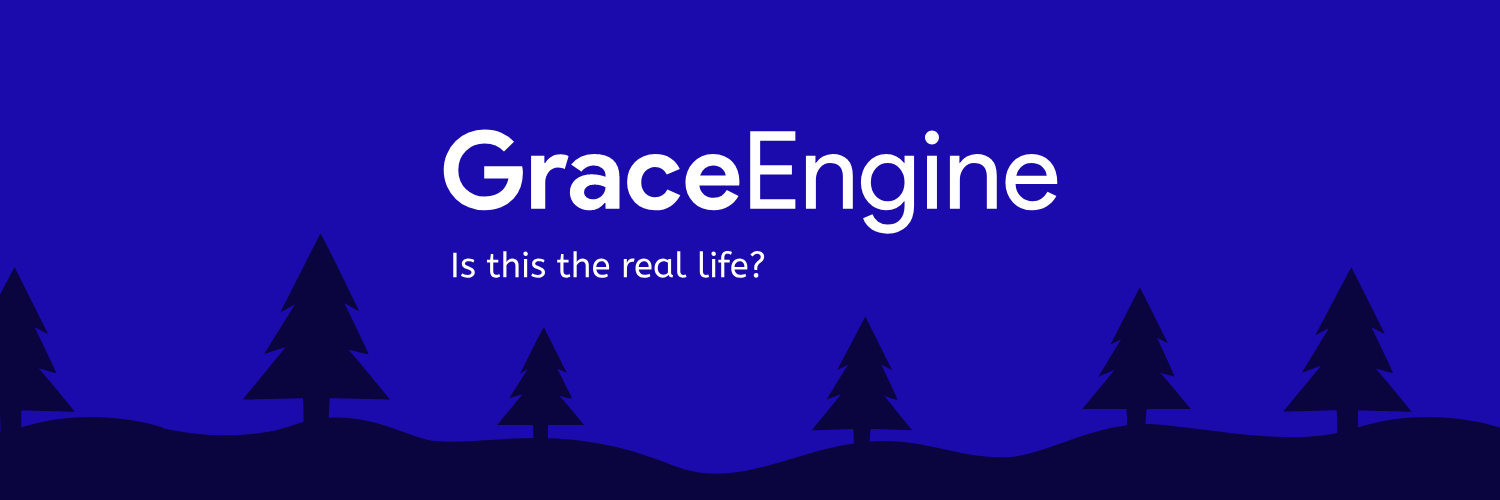
<style>
.page{position:relative;width:1500px;height:500px;background:#1c0bac}
.page>*{position:absolute;margin:0}
.t1{font:108px "ProductSans-Regular";color:#ffffff}
.t2{font:108px "ProductSans-Bold";color:#ffffff}
.t3{font:35px "ABeeZee-Regular";color:#ffffff}
</style>
<div class="page">
<p class="t1" style="left:443px;top:129px;width:615px;height:105px"><span class="t2">Grace</span>Engine</p>
<p class="t3" style="left:453px;top:250px;width:312px;height:28px">Is this the real life?</p>
</div>
